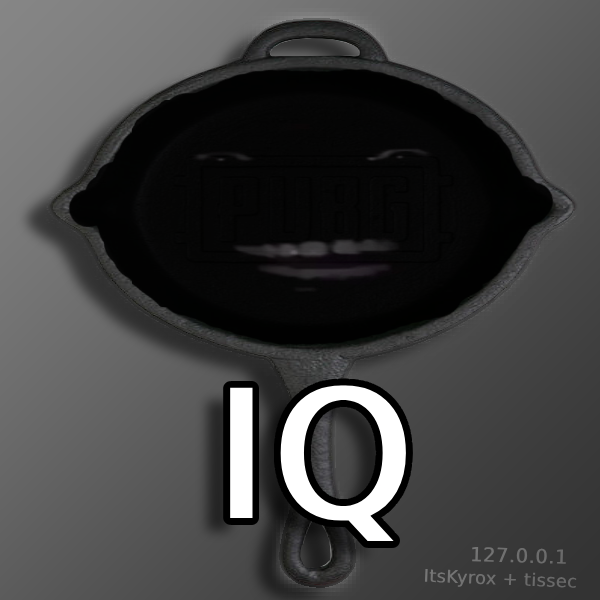
<style>
.page{position:relative;width:600px;height:600px}
.page>*{position:absolute;margin:0}
.t1{font:178.6px "DejaVuSans";color:#ffffff;font-weight:bold}
.t2{font:19.5px "DejaVuSans";color:#6e6e6e;font-weight:bold}
.t3{font:17.6px "DejaVuSans";color:#707070;font-weight:bold}
</style>
<div class="page">
<p class="t1" style="left:230px;top:385px;width:176px;height:157px">IQ</p>
<p class="t2" style="left:472px;top:547px;width:94px;height:17px;rotate:2deg">127.0.0.1</p>
<p class="t3" style="left:424px;top:569px;width:153px;height:19px;rotate:2deg">ItsKyrox + tissec</p>
</div>
